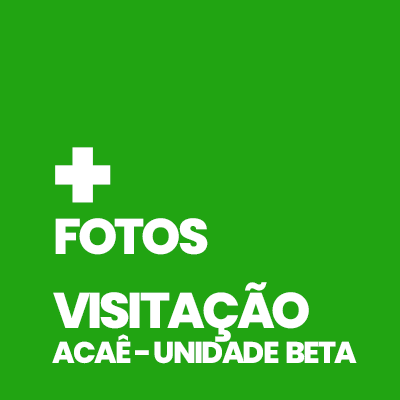
<style>
.page{position:relative;width:400px;height:400px;background:#21a412}
.page>*{position:absolute;margin:0}
.t1{font:107.6px "Poppins-ExtraBold";letter-spacing:-0.06em;color:#ffffff;text-transform:uppercase}
.t2{font:30px/34.4px "Poppins-ExtraBold";letter-spacing:-0.06em;color:#ffffff;text-transform:uppercase}
.t3{font:50px/37.4px "Poppins-ExtraBold";letter-spacing:-0.06em;color:#ffffff;text-transform:uppercase}
</style>
<div class="page">
<p class="t1" style="left:55px;top:147px;width:56px;height:56px">+</p>
<p class="t2" style="left:52px;top:218px;width:305px;height:146px"><span class="t3">fotos<br><br>visitação<br></span>acaê - unidade  beta</p>
</div>
